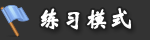
<style>
.page{position:relative;width:150px;height:40px;background:#333333}
.page>*{position:absolute;margin:0}
.t1{font:24px "STXinwei";letter-spacing:-0.05em;color:#ffffff;font-weight:bold}
</style>
<div class="page">
<p class="t1" style="left:40px;top:8px;width:91px;height:22px">练习模式</p>
</div>
